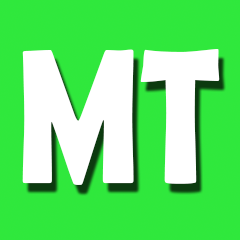
<style>
.page{position:relative;width:240px;height:240px;background:#2fe83c}
.page>*{position:absolute;margin:0}
.t1{font:192.9px "BerlinSansFBDemi-Bold";color:#ffffff;scale:0.79 1}
</style>
<div class="page">
<p class="t1" style="left:22px;top:49px;width:198px;height:136px">MT</p>
</div>
